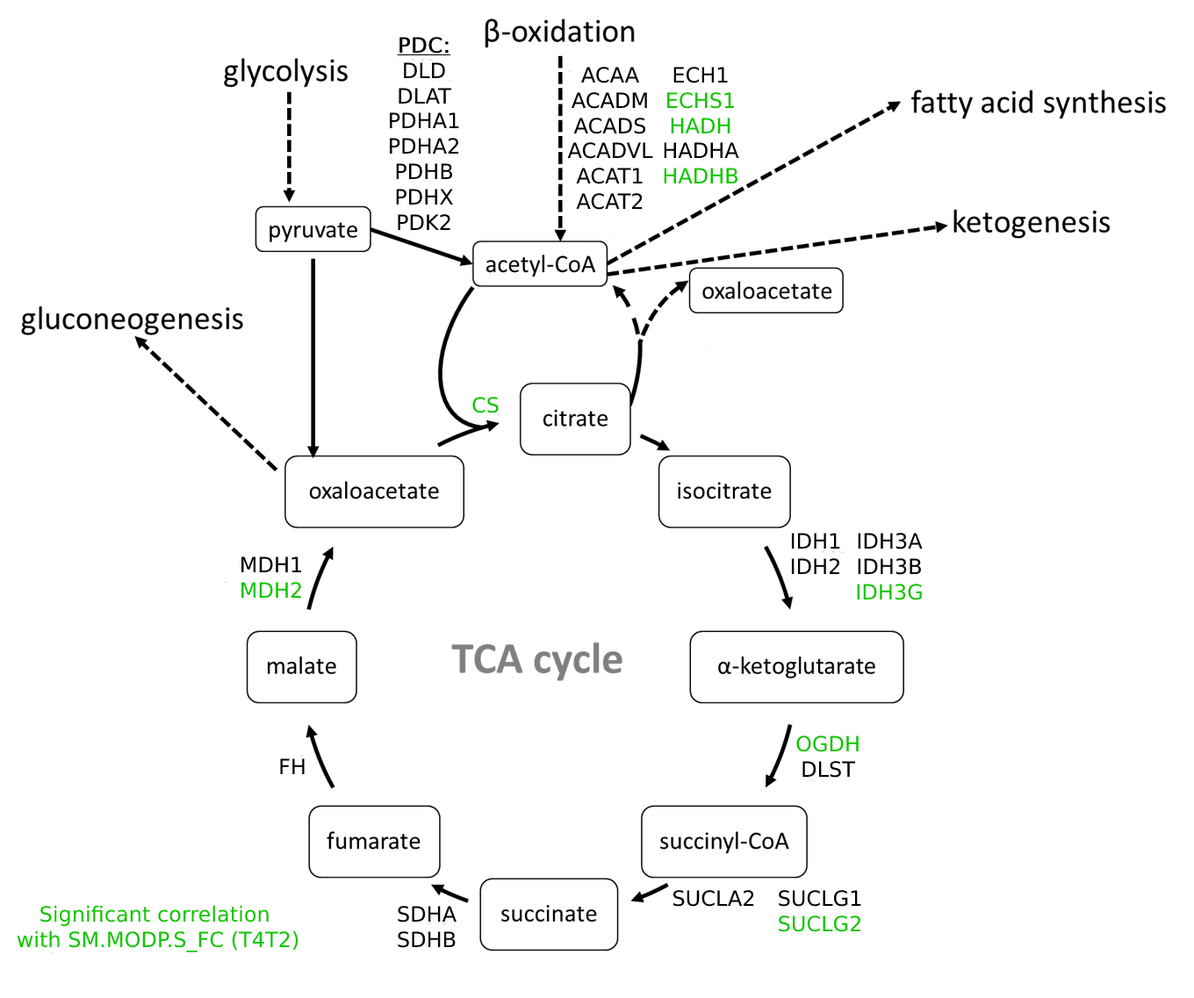
<style>
.page{position:relative;width:1194px;height:998px;background:#ffffff}
.page>*{position:absolute;margin:0}
.t1{font:21.1px "DejaVuSans";color:#000000}
.t2{font:21.1px "DejaVuSans";color:#000000;font-weight:bold;text-decoration:underline}
.t3{font:21.1px "DejaVuSans";color:#12c500}
</style>
<div class="page">
<p class="t1" style="left:390px;top:37px;width:69px;height:193px;text-align:center"><span class="t2">PDC:<br></span>DLD<br>DLAT<br>PDHA1<br>PDHA2<br>PDHB<br>PDHX<br>PDK2</p>
<p class="t1" style="left:567px;top:67px;width:86px;height:143px;text-align:center">ACAA<br>ACADM<br>ACADS<br>ACADVL<br>ACAT1<br>ACAT2</p>
<p class="t3" style="left:664px;top:67px;width:75px;height:117px;text-align:center"><span class="t1">ECH1<br></span>ECHS1<br>HADH<span class="t1"><br>HADHA<br></span>HADHB</p>
<p class="t3" style="left:472px;top:397px;width:27px;height:17px">CS</p>
<p class="t1" style="left:791px;top:533px;width:49px;height:41px;text-align:center">IDH1<br>IDH2</p>
<p class="t1" style="left:857px;top:533px;width:66px;height:68px;text-align:center">IDH3A<br>IDH3B<span class="t3"><br>IDH3G</span></p>
<p class="t1" style="left:241px;top:557px;width:61px;height:41px;text-align:center">MDH1<br><span class="t3">MDH2</span></p>
<p class="t3" style="left:796px;top:736px;width:63px;height:42px;text-align:center">OGDH<br><span class="t1">DLST</span></p>
<p class="t1" style="left:280px;top:759px;width:25px;height:16px">FH</p>
<p class="t1" style="left:673px;top:890px;width:81px;height:17px">SUCLA2</p>
<p class="t1" style="left:779px;top:890px;width:82px;height:43px;text-align:center">SUCLG1<br><span class="t3">SUCLG2</span></p>
<p class="t3" style="left:17px;top:905px;width:282px;height:48px;text-align:center">Significant correlation <br>with SM.MODP.S_FC (T4T2)</p>
<p class="t1" style="left:398px;top:906px;width:59px;height:42px;text-align:center">SDHA<br>SDHB</p>
</div>
